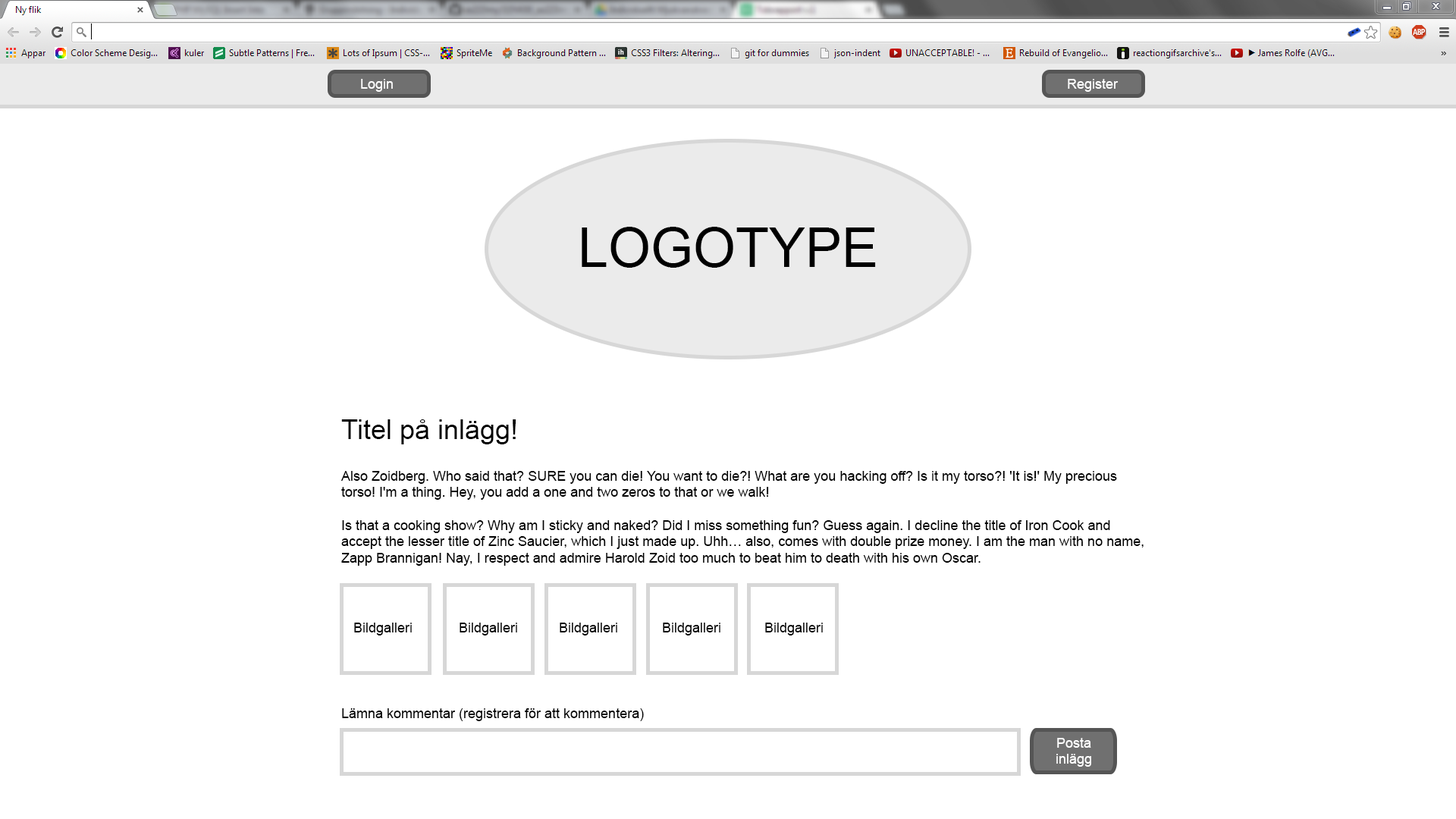
<style>
.page{position:relative;width:1456px;height:819px;background:#ffffff}
.page>*{position:absolute;margin:0}
.t1{font:13.6px "ArialMT";color:#ffffff}
.t2{font:54.6px "ArialMT";color:#000000}
.t3{font:27.3px "ArialMT";color:#000000}
.t4{font:13.6px "ArialMT";color:#000000}
</style>
<div class="page">
<p class="t1" style="left:361px;top:79px;width:32px;height:13px">Login</p>
<p class="t1" style="left:1068px;top:79px;width:51px;height:13px">Register</p>
<p class="t2" style="left:582px;top:227px;width:294px;height:41px">LOGOTYPE</p>
<p class="t3" style="left:341px;top:419px;width:175px;height:25px">Titel på inlägg!</p>
<p class="t4" style="left:340px;top:471px;width:804px;height:95px">Also Zoidberg. Who said that? SURE you can die! You want to die?! What are you hacking off? Is it my torso?! 'It is!' My precious torso! I'm a thing. Hey, you add a one and two zeros to that or we walk!<br><br>Is that a cooking show? Why am I sticky and naked? Did I miss something fun? Guess again. I decline the title of Iron Cook and accept the lesser title of Zinc Saucier, which I just made up. Uhh… also, comes with double prize money. I am the man with no name, Zapp Brannigan! Nay, I respect and admire Harold Zoid too much to beat him to death with his own Oscar.</p>
<p class="t4" style="left:354px;top:623px;width:58px;height:12px">Bildgalleri</p>
<p class="t4" style="left:460px;top:623px;width:57px;height:12px">Bildgalleri</p>
<p class="t4" style="left:560px;top:623px;width:57px;height:12px">Bildgalleri</p>
<p class="t4" style="left:663px;top:623px;width:57px;height:12px">Bildgalleri</p>
<p class="t4" style="left:765px;top:623px;width:58px;height:12px">Bildgalleri</p>
<p class="t4" style="left:342px;top:708px;width:302px;height:13px">Lämna kommentar (registrera för att kommentera)</p>
<p class="t1" style="left:1056px;top:738px;width:35px;height:29px;text-align:center">Posta<br>inlägg</p>
</div>
